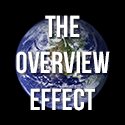
<style>
.page{position:relative;width:125px;height:125px;background:#000000}
.page>*{position:absolute;margin:0}
.t1{font:30.5px "BebasNeue";color:#ffffff}
</style>
<div class="page">
<p class="t1" style="left:16px;top:15px;width:94px;height:96px;text-align:center">the<br>overview<br>effect</p>
</div>
